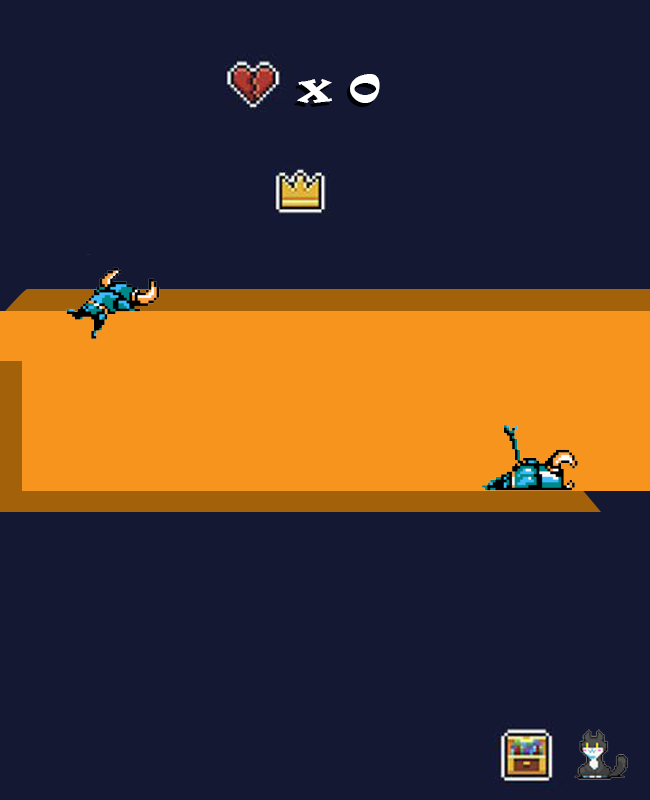
<style>
.page{position:relative;width:650px;height:800px;background:#141833}
.page>*{position:absolute;margin:0}
.t1{font:36.5px "Ravie";color:#ffffff;scale:1.15 1}
</style>
<div class="page">
<p class="t1" style="left:297px;top:74px;width:83px;height:29px">x 0</p>
</div>
